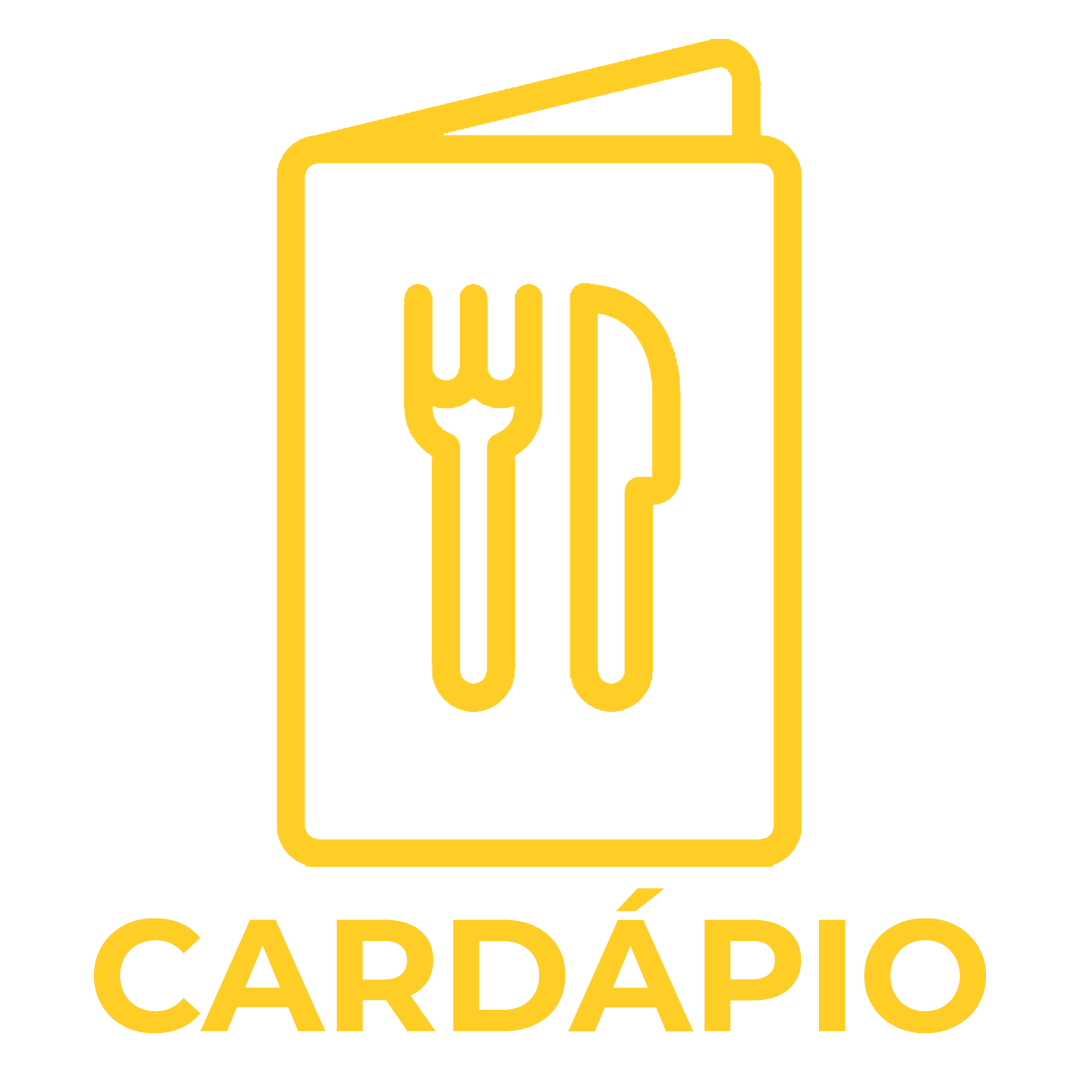
<style>
.page{position:relative;width:1080px;height:1080px;background:#ffffff}
.page>*{position:absolute;margin:0}
.t1{font:158.8px "Montserrat-Bold";color:#fece26;text-transform:uppercase}
</style>
<div class="page">
<p class="t1" style="left:94px;top:888px;width:892px;height:146px">Cardápio</p>
</div>
